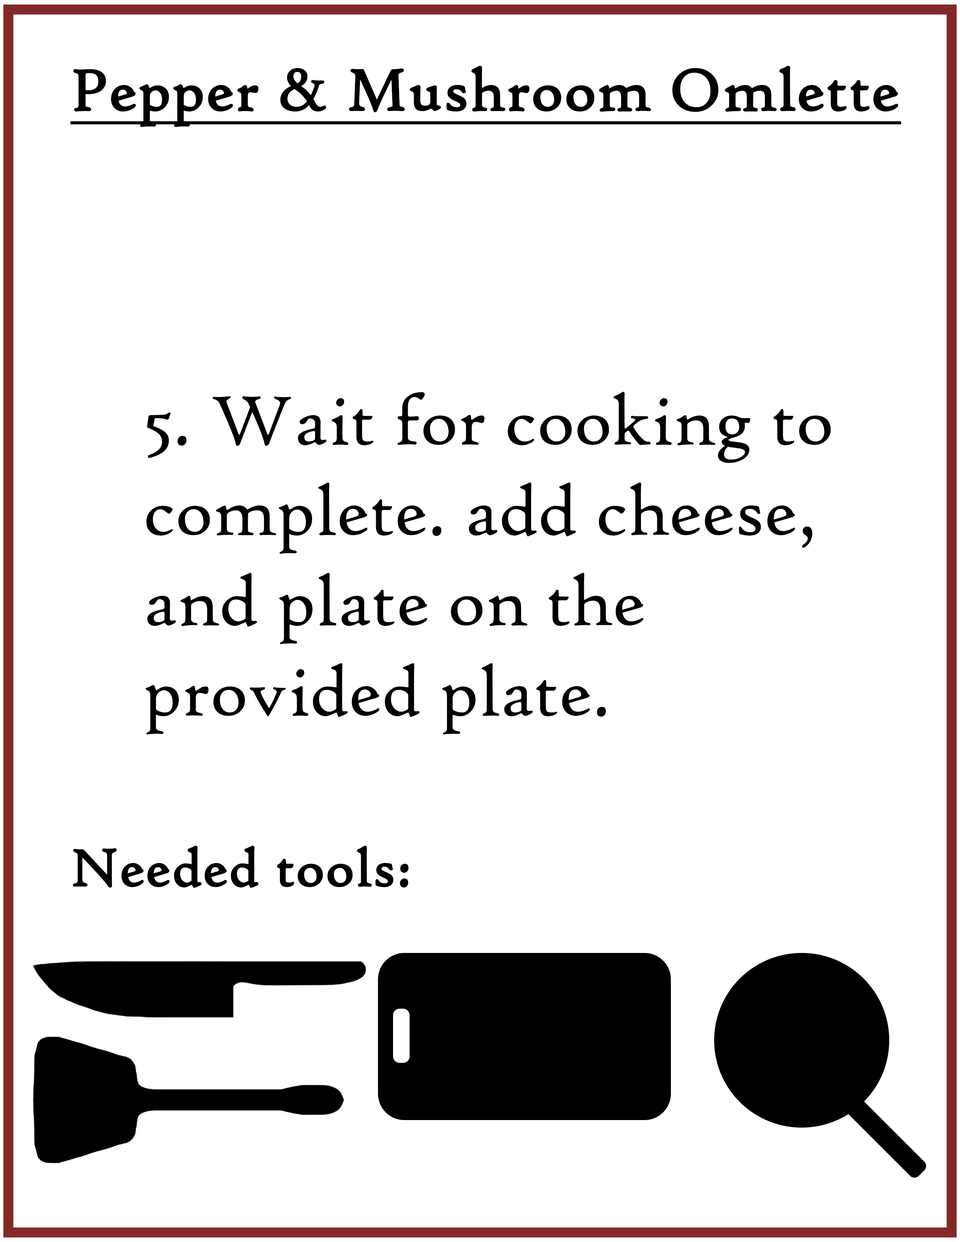
<style>
.page{position:relative;width:960px;height:1242px;background:#ffffff}
.page>*{position:absolute;margin:0}
.t1{font:62.7px "HighTowerText-Reg";color:#000000;font-weight:bold;text-decoration:underline}
.t2{font:75.3px "HighTowerText-Reg";color:#000000}
.t3{font:56.5px "HighTowerText-Reg";color:#000000;font-weight:bold}
</style>
<div class="page">
<p class="t1" style="left:70px;top:65px;width:831px;height:62px">Pepper &amp; Mushroom Omlette</p>
<p class="t2" style="left:145px;top:392px;width:686px;height:343px">5. Wait for cooking to complete. add cheese, and plate on the provided plate.</p>
<p class="t3" style="left:73px;top:845px;width:336px;height:43px">Needed tools:</p>
</div>
